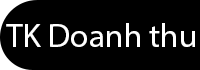
<style>
.page{position:relative;width:200px;height:70px;background:#000000}
.page>*{position:absolute;margin:0}
.t1{font:32.9px "MyriadPro-Regular";color:#fefefe}
</style>
<div class="page">
<p class="t1" style="left:6px;top:23px;width:189px;height:24px">TK Doanh thu</p>
</div>
